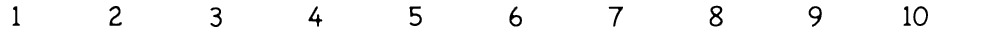
<style>
.page{position:relative;width:1000px;height:32px;background:#ffffff}
.page>*{position:absolute;margin:0}
.t1{font:30px "Chalkboard-Bold";letter-spacing:-0.075em}
</style>
<div class="page">
<p class="t1" style="left:11px;top:5px;width:10px;height:22px">1</p>
<p class="t1" style="left:108px;top:5px;width:15px;height:22px">2</p>
<p class="t1" style="left:209px;top:6px;width:14px;height:22px">3</p>
<p class="t1" style="left:307px;top:5px;width:17px;height:23px">4</p>
<p class="t1" style="left:408px;top:5px;width:15px;height:22px">5</p>
<p class="t1" style="left:508px;top:5px;width:15px;height:23px">6</p>
<p class="t1" style="left:607px;top:5px;width:17px;height:23px">7</p>
<p class="t1" style="left:708px;top:4px;width:16px;height:24px">8</p>
<p class="t1" style="left:807px;top:5px;width:16px;height:23px">9</p>
<p class="t1" style="left:902px;top:5px;width:27px;height:22px">10</p>
</div>
